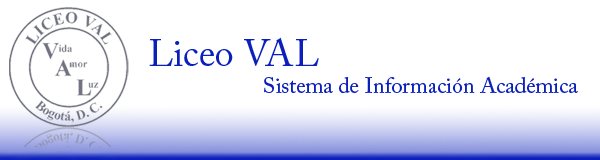
<style>
.page{position:relative;width:600px;height:160px;background:#ffffff}
.page>*{position:absolute;margin:0}
.t1{font:38px "ACaslonPro-Regular";color:#0b20bb}
.t2{font:22px "ACaslonPro-Regular";color:#0b20bb}
</style>
<div class="page">
<p class="t1" style="left:149px;top:37px;width:170px;height:29px">Liceo VAL</p>
<p class="t2" style="left:264px;top:76px;width:314px;height:17px">Sistema de Información Académica</p>
</div>
